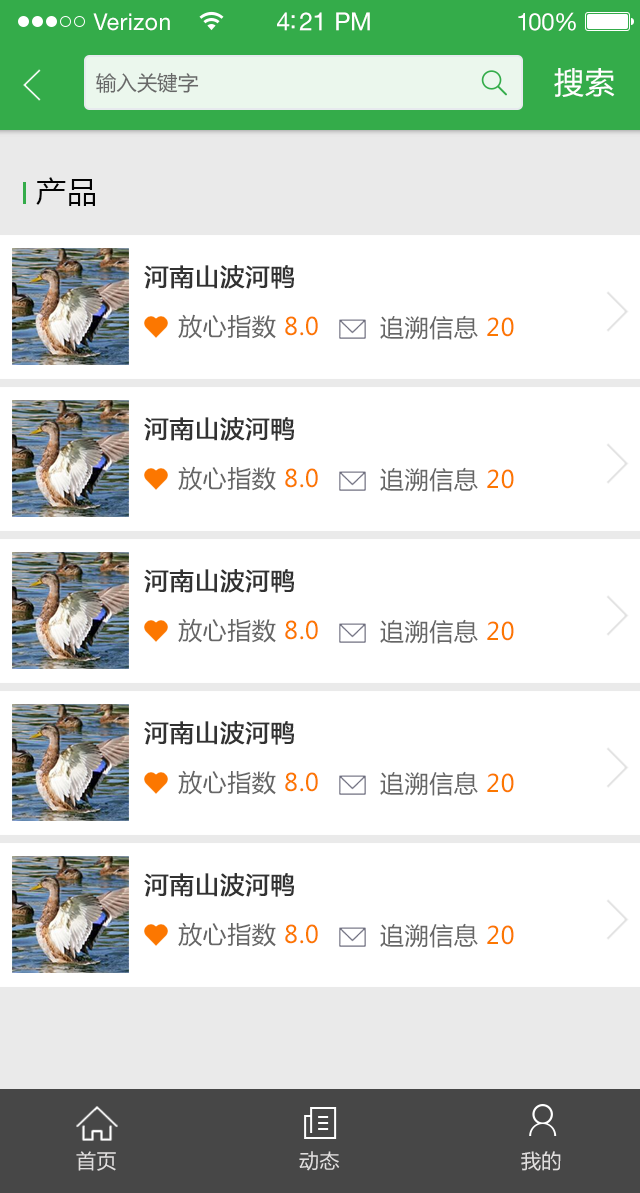
<style>
.page{position:relative;width:640px;height:1193px;background:#ffffff}
.page>*{position:absolute;margin:0}
.t1{font:23px "HelveticaNeueLTStd-Roman";letter-spacing:0.02em;color:#ffffff}
.t2{font:25px "HelveticaNeueLTStd-Roman";letter-spacing:-0.02em;color:#ffffff}
.t3{font:24px "HelveticaNeueLTStd-Roman";letter-spacing:-0.02em;color:#ffffff}
.t4{font:20.3px "MicrosoftYaHei";color:#676767}
.t5{font:30px "MicrosoftYaHei";letter-spacing:0.025em;color:#ffffff}
.t6{font:30px "MicrosoftYaHei";letter-spacing:0.025em;color:#030303}
.t7{font:24px "MicrosoftYaHei";letter-spacing:0.025em;color:#323232;font-weight:bold}
.t8{font:24px "MicrosoftYaHei";letter-spacing:0.025em;color:#666666}
.t9{font:24px "MicrosoftYaHei";letter-spacing:0.025em;color:#fc7700}
.t10{font:20px "MicrosoftYaHei";letter-spacing:0.025em;color:#e0dede}
</style>
<div class="page">
<p class="t1" style="left:93px;top:13px;width:77px;height:18px">Verizon</p>
<p class="t2" style="left:277px;top:12px;width:93px;height:19px">4:21 PM</p>
<p class="t3" style="left:518px;top:12px;width:58px;height:19px">100%</p>
<p class="t4" style="left:96px;top:72px;width:103px;height:21px">输入关键字</p>
<p class="t5" style="left:554px;top:68px;width:61px;height:29px">搜索</p>
<p class="t6" style="left:36px;top:177px;width:59px;height:29px">产品</p>
<p class="t7" style="left:144px;top:265px;width:150px;height:24px">河南山波河鸭</p>
<p class="t8" style="left:178px;top:314px;width:140px;height:25px">放心指数 <span class="t9">8.0</span></p>
<p class="t8" style="left:380px;top:315px;width:134px;height:25px">追溯信息 <span class="t9">20</span></p>
<p class="t7" style="left:144px;top:417px;width:150px;height:24px">河南山波河鸭</p>
<p class="t8" style="left:178px;top:466px;width:140px;height:25px">放心指数 <span class="t9">8.0</span></p>
<p class="t8" style="left:380px;top:467px;width:134px;height:25px">追溯信息 <span class="t9">20</span></p>
<p class="t7" style="left:144px;top:569px;width:150px;height:24px">河南山波河鸭</p>
<p class="t8" style="left:178px;top:618px;width:140px;height:25px">放心指数 <span class="t9">8.0</span></p>
<p class="t8" style="left:380px;top:619px;width:134px;height:25px">追溯信息 <span class="t9">20</span></p>
<p class="t7" style="left:144px;top:721px;width:150px;height:24px">河南山波河鸭</p>
<p class="t8" style="left:178px;top:770px;width:140px;height:25px">放心指数 <span class="t9">8.0</span></p>
<p class="t8" style="left:380px;top:771px;width:134px;height:25px">追溯信息 <span class="t9">20</span></p>
<p class="t7" style="left:144px;top:873px;width:150px;height:24px">河南山波河鸭</p>
<p class="t8" style="left:178px;top:922px;width:140px;height:25px">放心指数 <span class="t9">8.0</span></p>
<p class="t8" style="left:380px;top:923px;width:134px;height:25px">追溯信息 <span class="t9">20</span></p>
<p class="t10" style="left:76px;top:1151px;width:40px;height:20px">首页</p>
<p class="t10" style="left:299px;top:1151px;width:41px;height:20px">动态</p>
<p class="t10" style="left:521px;top:1151px;width:40px;height:20px">我的</p>
</div>
